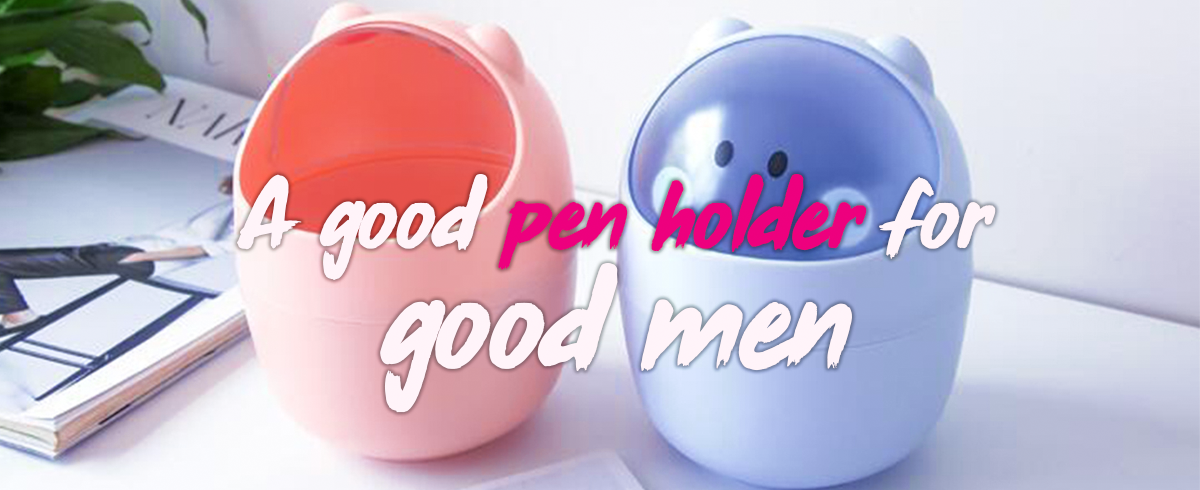
<style>
.page{position:relative;width:1200px;height:490px}
.page>*{position:absolute;margin:0}
.t1{font:102.2px "RushHour";color:#ed008c}
.t2{font:102.2px "RushHour";color:#fff1f9}
.t3{font:144.8px/118.1px "RushHour";color:#fff1f9}
</style>
<div class="page">
<p class="t1" style="left:237px;top:174px;width:759px;height:239px;text-align:center"><span class="t2">A good </span>pen holder<span class="t2"> for<br></span><span class="t3">good men</span></p>
</div>
